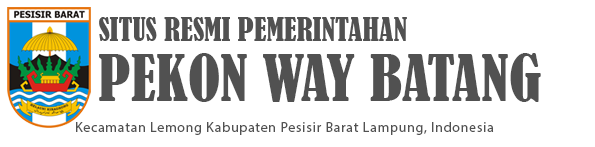
<style>
.page{position:relative;width:595px;height:147px;background:#ffffff}
.page>*{position:absolute;margin:0}
.t1{font:30px "BernardMT-Condensed";color:#515151}
.t2{font:60px "BernardMT-Condensed";color:#515151}
.t3{font:14px "MyriadPro-Regular";letter-spacing:0.05em;color:#515151}
</style>
<div class="page">
<p class="t1" style="left:99px;top:17px;width:308px;height:24px">SITUS RESMI PEMERINTAHAN</p>
<p class="t2" style="left:99px;top:53px;width:442px;height:49px">PEKON WAY BATANG</p>
<p class="t3" style="left:76px;top:122px;width:418px;height:13px">Kecamatan Lemong Kabupaten Pesisir Barat Lampung, Indonesia</p>
</div>
